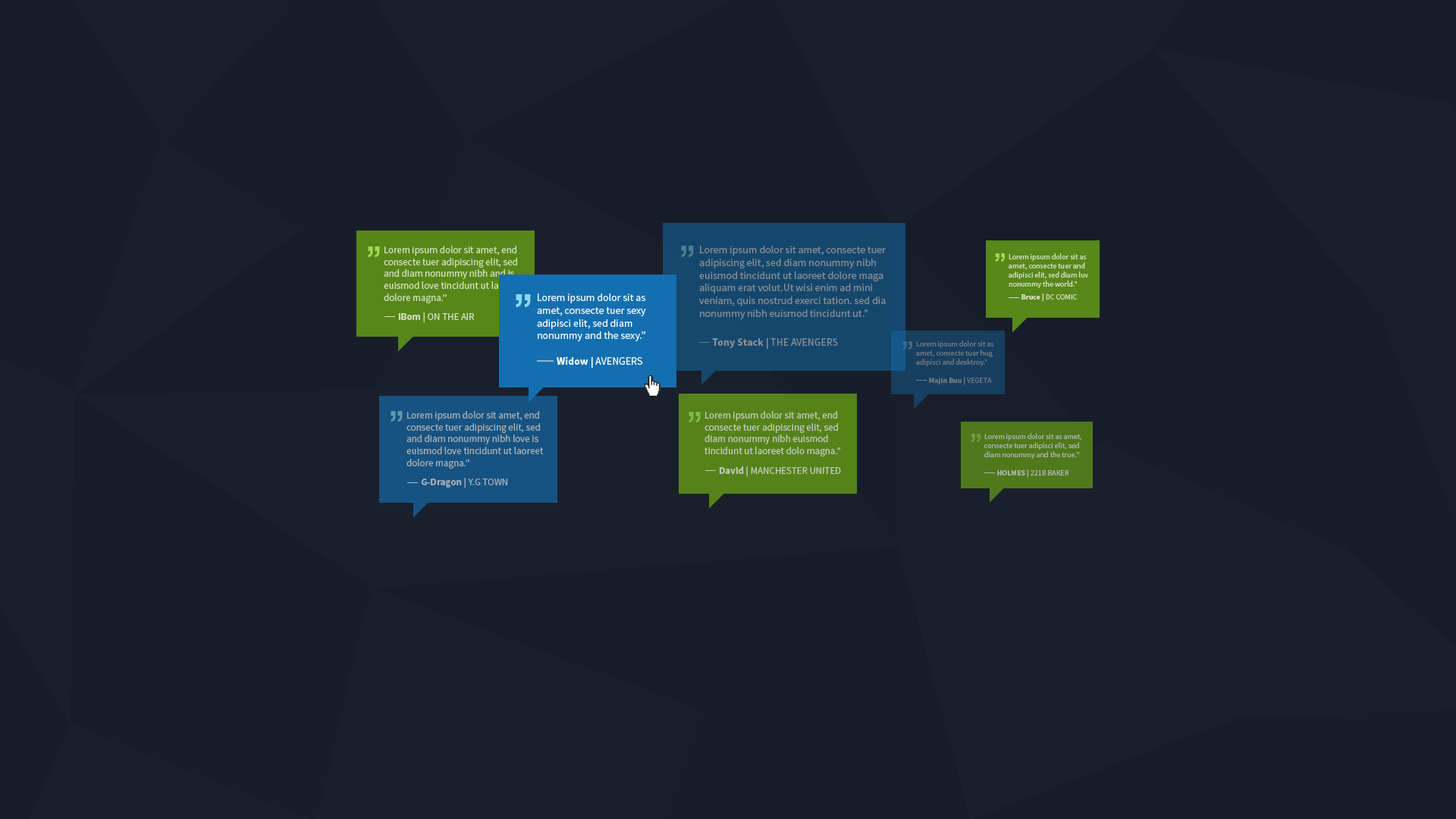
<style>
.page{position:relative;width:1456px;height:819px;background:#19202b}
.page>*{position:absolute;margin:0}
.t1{font:9.9px "SourceSansPro-Regular";color:#d5e1c5}
.t2{font:9.9px "SourceSansPro-Bold";color:#d5e1c5}
.t3{font:9.9px "SourceSansPro-Regular";color:#d5e1c5;text-transform:uppercase}
.t4{font:61px "Tunga";color:#4f7c8e}
.t5{font:10.6px "SourceSansPro-Regular";color:#8b8f94}
.t6{font:10.6px "SourceSansPro-Bold";color:#8b8f94}
.t7{font:10.6px "SourceSansPro-Regular";color:#8b8f94;text-transform:uppercase}
.t8{font:57.4px "Tunga";color:#a1d855}
.t9{font:45.8px "Tunga";color:#a1d856}
.t10{font:7.6px "SourceSansPro-Regular";color:#d5e1c6}
.t11{font:7.6px "SourceSansPro-Bold";color:#d5e1c6}
.t12{font:7.6px "SourceSansPro-Regular";color:#d5e1c6;text-transform:uppercase}
.t13{font:10.6px "SourceSansPro-Regular";color:#ffffff}
.t14{font:10.6px "SourceSansPro-Bold";color:#ffffff}
.t15{font:10.6px "SourceSansPro-Regular";color:#ffffff;text-transform:uppercase}
.t16{font:71.5px "Tunga";color:#88daf2}
.t17{font:45.8px "Tunga"}
.t18{font:7.6px "SourceSansPro-Regular";color:#74797f}
.t19{font:7.6px "SourceSansPro-Bold";color:#74797f}
.t20{font:7.6px "SourceSansPro-Regular";color:#74797f;text-transform:uppercase}
.t21{font:57.4px "Tunga";color:#6199ad}
.t22{font:9.9px "SourceSansPro-Regular";color:#afb1b5}
.t23{font:9.9px "SourceSansPro-Bold";color:#afb1b5}
.t24{font:9.9px "SourceSansPro-Regular";color:#afb1b5;text-transform:uppercase}
.t25{font:57.4px "Tunga";color:#87b54d}
.t26{font:9.9px "SourceSansPro-Regular";color:#c5cac2}
.t27{font:9.9px "SourceSansPro-Bold";color:#c5cac2}
.t28{font:9.9px "SourceSansPro-Regular";color:#c5cac2;text-transform:uppercase}
.t29{font:45.8px "Tunga";color:#729a46}
.t30{font:7.6px "SourceSansPro-Regular";color:#aeb1b5}
.t31{font:7.6px "SourceSansPro-Bold";color:#aeb1b5}
.t32{font:7.6px "SourceSansPro-Regular";color:#aeb1b5;text-transform:uppercase}
</style>
<div class="page">
<p class="t1" style="left:384px;top:246px;width:137px;height:77px">Lorem ipsum dolor sit amet, end consecte tuer adipiscing elit, sed and diam nonummy nibh and is euismod love tincidunt ut laoreet dolore magna.”<br><span class="t2">       iBom | </span><span class="t3">ON THE AIR</span></p>
<p class="t4" style="left:681px;top:246px;width:13px;height:11px;rotate:180deg">“</p>
<p class="t5" style="left:699px;top:246px;width:187px;height:103px">Lorem ipsum dolor sit amet, consecte tuer adipiscing elit, sed diam nonummy nibh euismod tincidunt ut laoreet dolore maga aliquam erat volut.Ut wisi enim ad mini veniam, quis nostrud exerci tation. sed dia nonummy nibh euismod tincidunt ut.”<br><br><span class="t6">      Tony Stack | </span><span class="t7">the avengers</span></p>
<p class="t8" style="left:368px;top:246px;width:12px;height:11px;rotate:180deg">“</p>
<p class="t9" style="left:995px;top:253px;width:10px;height:9px;rotate:180deg">“</p>
<p class="t10" style="left:1009px;top:253px;width:79px;height:49px">Lorem ipsum dolor sit as amet, consecte tuer and adipisci elit, sed diam luv nonummy the world.”<br><span class="t11">        Bruce | </span><span class="t12">DC COMIC</span></p>
<p class="t13" style="left:537px;top:293px;width:109px;height:75px">Lorem ipsum dolor sit as amet, consecte tuer sexy adipisci elit, sed diam nonummy and the sexy.”<br><br><span class="t14">         Widow | </span><span class="t15">avengers</span></p>
<p class="t16" style="left:516px;top:294px;width:15px;height:13px;rotate:180deg">“</p>
<p class="t17" style="left:902px;top:341px;width:10px;height:9px;rotate:180deg">“</p>
<p class="t18" style="left:916px;top:340px;width:78px;height:45px">Lorem ipsum dolor sit as amet, consecte tuer hug adipisci and desktroy.”<br><span class="t19"><br>        Majin Buu | </span><span class="t20">VEGETA</span></p>
<p class="t21" style="left:391px;top:411px;width:12px;height:11px;rotate:180deg">“</p>
<p class="t22" style="left:406px;top:411px;width:138px;height:77px">Lorem ipsum dolor sit amet, end consecte tuer adipiscing elit, sed and diam nonummy nibh love is euismod love tincidunt ut laoreet dolore magna.”<br><span class="t23">       G-Dragon | </span><span class="t24">Y.G TOWN</span></p>
<p class="t25" style="left:689px;top:412px;width:12px;height:10px;rotate:180deg">“</p>
<p class="t26" style="left:704px;top:411px;width:137px;height:66px">Lorem ipsum dolor sit amet, end consecte tuer adipiscing elit, sed diam nonummy nibh euismod tincidunt ut laoreet dolo magna.”<br><span class="t27">       David | </span><span class="t28">MANCHESTER UNITED</span></p>
<p class="t29" style="left:971px;top:434px;width:10px;height:8px;rotate:180deg">“</p>
<p class="t30" style="left:984px;top:433px;width:97px;height:45px">Lorem ipsum dolor sit as amet, consecte tuer adipisci elit, sed diam nonummy and the true.”<br><span class="t31"><br>        HOLMES | </span><span class="t32">221B BAKER</span></p>
</div>
